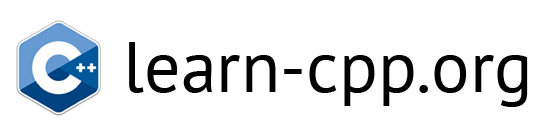
<style>
.page{position:relative;width:543px;height:135px;background:#ffffff}
.page>*{position:absolute;margin:0}
.t1{font:72px "PTSans-Regular";color:#000000}
</style>
<div class="page">
<p class="t1" style="left:129px;top:42px;width:399px;height:65px">learn-cpp.org</p>
</div>
